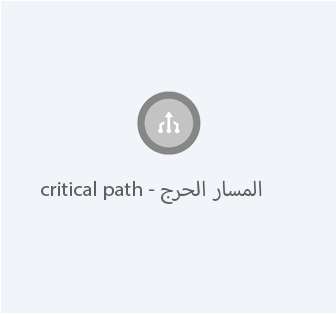
<style>
.page{position:relative;width:336px;height:314px;background:#f1f4f9}
.page>*{position:absolute;margin:0}
.t1{font:28.9px "MyriadArabic-Regular";color:#5f5f5f}
</style>
<div class="page">
<p class="t1" style="left:41px;top:180px;width:221px;height:24px">المسار الحرج - critical path</p>
</div>
